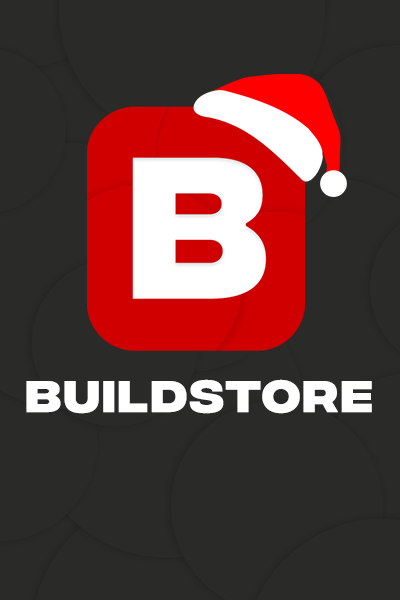
<style>
.page{position:relative;width:400px;height:600px;background:#2a2a29}
.page>*{position:absolute;margin:0}
.t1{font:44.4px "IntegralCF-Bold";letter-spacing:0.04em;color:#ffffff;scale:1.06 1}
</style>
<div class="page">
<p class="t1" style="left:26px;top:379px;width:346px;height:35px">BUILDSTORE</p>
</div>
